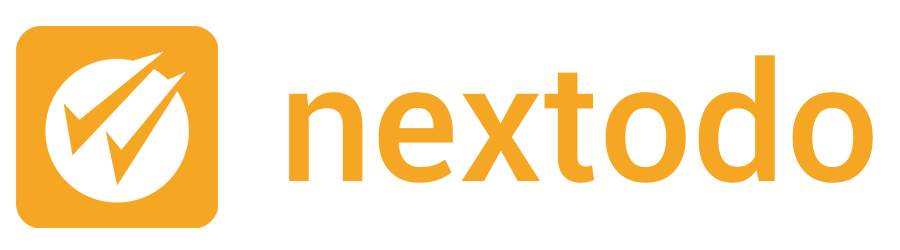
<style>
.page{position:relative;width:900px;height:250px;background:#ffffff}
.page>*{position:absolute;margin:0}
.t1{font:165px "Roboto-Medium";color:#f5a623}
</style>
<div class="page">
<p class="t1" style="left:289px;top:55px;width:584px;height:128px">nextodo</p>
</div>
